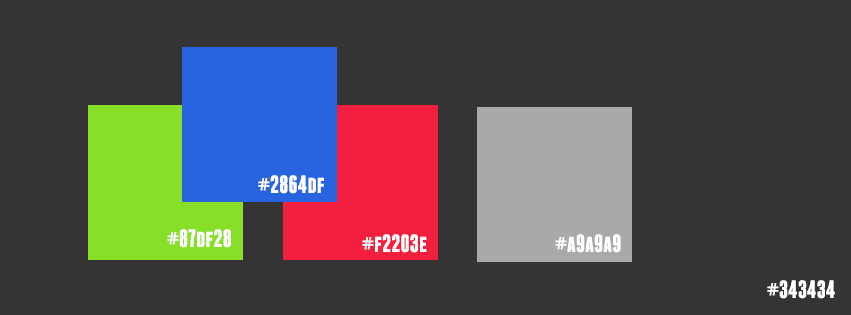
<style>
.page{position:relative;width:851px;height:315px;background:#343434}
.page>*{position:absolute;margin:0}
.t1{font:25px "Franchise-Bold";color:#ffffff}
</style>
<div class="page">
<p class="t1" style="left:258px;top:175px;width:66px;height:19px">#2864df</p>
<p class="t1" style="left:167px;top:229px;width:64px;height:19px">#87df28</p>
<p class="t1" style="left:362px;top:234px;width:65px;height:19px">#f2203e</p>
<p class="t1" style="left:555px;top:234px;width:66px;height:19px">#a9a9a9</p>
<p class="t1" style="left:767px;top:280px;width:68px;height:19px">#343434</p>
</div>
